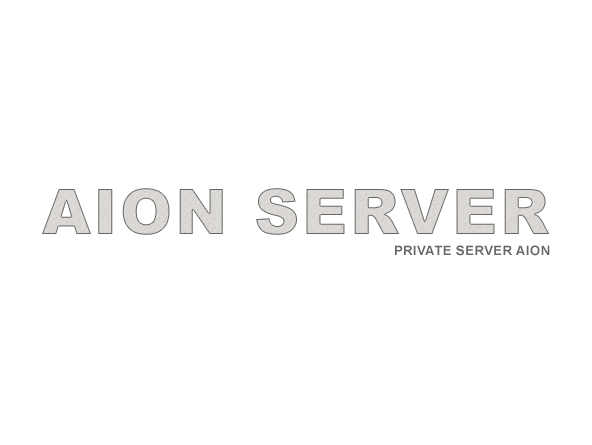
<style>
.page{position:relative;width:592px;height:445px;background:#ffffff}
.page>*{position:absolute;margin:0}
.t1{font:63px "Arial-Black";letter-spacing:0.04em;color:#dbd8d5;text-transform:uppercase}
.t2{font:13px "Arial-BoldMT";letter-spacing:0.04em;color:#666666;text-transform:uppercase}
</style>
<div class="page">
<p class="t1" style="left:42px;top:188px;width:508px;height:47px">Aion server</p>
<p class="t2" style="left:395px;top:245px;width:155px;height:11px">Private server aion</p>
</div>
